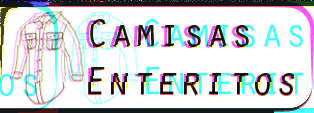
<style>
.page{position:relative;width:314px;height:113px;background:#ffffff}
.page>*{position:absolute;margin:0}
.t1{font:40px "OratorStd"}
</style>
<div class="page">
<p class="t1" style="left:86px;top:19px;width:207px;height:76px">Camisas<br>Enteritos</p>
</div>
